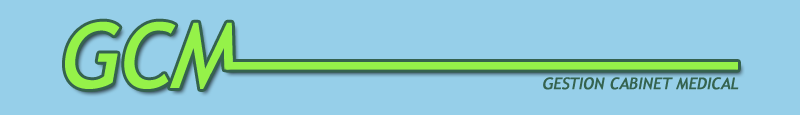
<style>
.page{position:relative;width:800px;height:115px;background:#96cfe9}
.page>*{position:absolute;margin:0}
.t1{font:16px "TrebuchetMS";letter-spacing:-0.01em;color:#35634f;font-weight:bold;font-style:italic}
</style>
<div class="page">
<p class="t1" style="left:543px;top:77px;width:196px;height:13px">GESTION CABINET MEDICAL</p>
</div>
